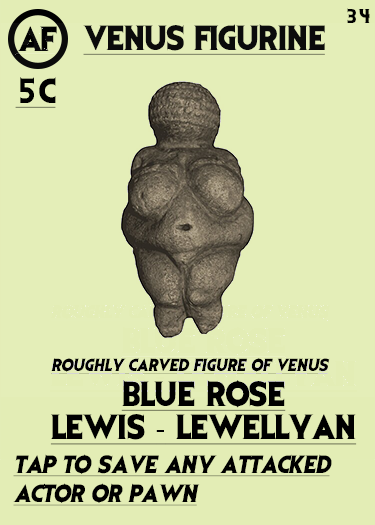
<style>
.page{position:relative;width:375px;height:525px;background:#e4eeb8}
.page>*{position:absolute;margin:0}
.t1{font:16.7px "EvilDead";letter-spacing:-0.05em;color:#000000}
.t2{font:29.2px "EvilDead";letter-spacing:-0.05em;color:#000000}
.t3{font:29.2px "EvilDead";letter-spacing:-0.025em;color:#000000;text-decoration:underline}
.t4{font:29.2px "EvilDead";color:#000000;text-decoration:underline}
.t5{font:14.6px "EvilDead";color:#000000;font-style:italic;text-decoration:underline}
.t6{font:29.2px/33.3px "EvilDead";color:#000000;text-decoration:underline}
.t7{font:29.2px/33.3px "MyriadPro-Regular";color:#000000;text-decoration:underline}
.t8{font:20.8px/29.2px "EvilDead";color:#000000;font-style:italic;text-decoration:underline}
</style>
<div class="page">
<p class="t1" style="left:347px;top:8px;width:23px;height:15px">34</p>
<p class="t2" style="left:17px;top:26px;width:40px;height:25px">AF</p>
<p class="t3" style="left:83px;top:24px;width:242px;height:31px">VENUS FIGURINE</p>
<p class="t4" style="left:15px;top:77px;width:41px;height:31px">5C</p>
<p class="t5" style="left:51px;top:358px;width:279px;height:16px">ROUGHLY carved figure of venus</p>
<p class="t6" style="left:50px;top:380px;width:307px;height:65px;text-align:center">Blue Rose<br>Lewis <span class="t7">-</span> Lewellyan</p>
<p class="t8" style="left:13px;top:454px;width:319px;height:52px">Tap to save any attacked<br>actor or pawn</p>
</div>
